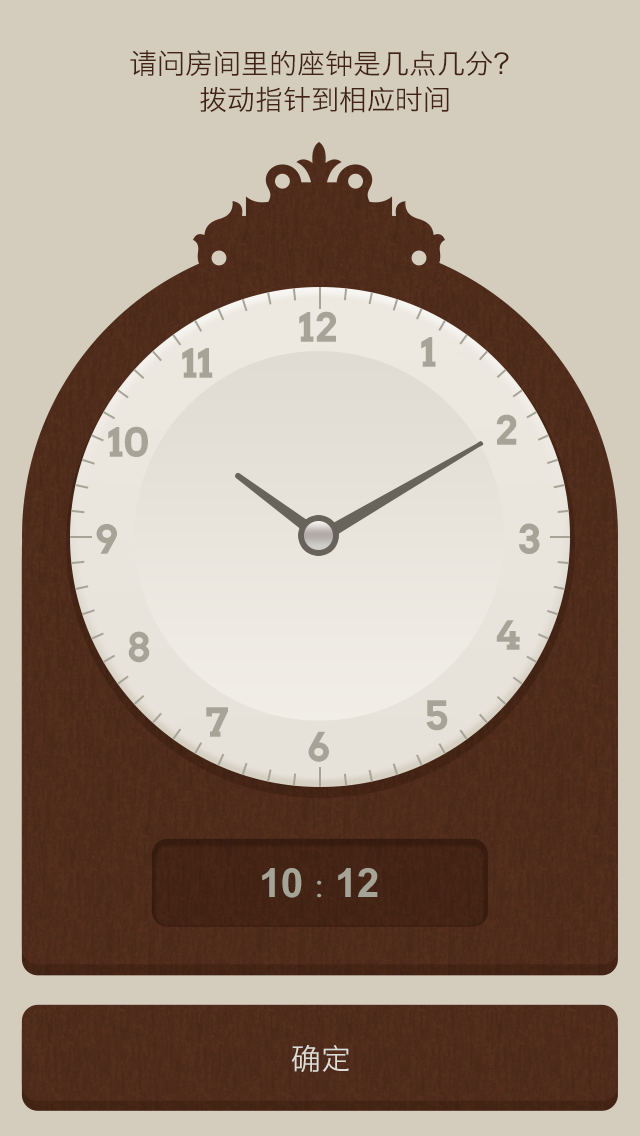
<style>
.page{position:relative;width:640px;height:1136px;background:#d4cdbe}
.page>*{position:absolute;margin:0}
.t1{font:28px/36px "HiraginoSansGB-W3";color:#412214}
.t2{font:40px "Arvo-Bold";color:#a6a497}
.t3{font:40px "Arial-BoldMT";color:#a6a497}
.t4{font:40px "FZZKFW--GB1-0";color:#a6a497}
.t5{font:30px "HiraginoSansGB-W3";color:#dcddd7}
</style>
<div class="page">
<p class="t1" style="left:130px;top:50px;width:379px;height:63px;text-align:center">请问房间里的座钟是几点几分？<br>拨动指针到相应时间</p>
<p class="t2" style="left:299px;top:311px;width:37px;height:31px">12</p>
<p class="t2" style="left:421px;top:337px;width:15px;height:30px">1</p>
<p class="t2" style="left:182px;top:348px;width:31px;height:30px">11</p>
<p class="t2" style="left:496px;top:414px;width:21px;height:31px">2</p>
<p class="t2" style="left:108px;top:426px;width:40px;height:31px">10</p>
<p class="t2" style="left:96px;top:524px;width:21px;height:30px">9</p>
<p class="t2" style="left:519px;top:523px;width:21px;height:31px">3</p>
<p class="t2" style="left:496px;top:620px;width:24px;height:30px">4</p>
<p class="t2" style="left:128px;top:631px;width:22px;height:32px">8</p>
<p class="t2" style="left:426px;top:700px;width:22px;height:31px">5</p>
<p class="t2" style="left:206px;top:707px;width:22px;height:30px">7</p>
<p class="t2" style="left:308px;top:731px;width:21px;height:31px">6</p>
<p class="t3" style="left:262px;top:868px;width:116px;height:30px">10 <span class="t4">: </span>12</p>
<p class="t5" style="left:291px;top:1045px;width:58px;height:27px">确定</p>
</div>
